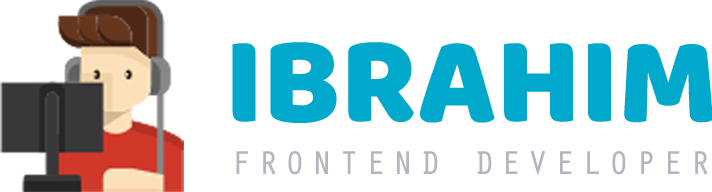
<style>
.page{position:relative;width:712px;height:192px;background:#ffffff}
.page>*{position:absolute;margin:0}
.t1{font:125px "BalooDa-Regular";letter-spacing:-0.025em;color:#00a8cc;text-transform:uppercase;font-weight:bold}
.t2{font:33.3px "OratorStd";letter-spacing:0.18em;color:#b5b5c1;text-transform:uppercase;font-weight:bold}
</style>
<div class="page">
<p class="t1" style="left:232px;top:42px;width:481px;height:81px">Ibrahim</p>
<p class="t2" style="left:236px;top:150px;width:472px;height:25px">Frontend developer</p>
</div>
